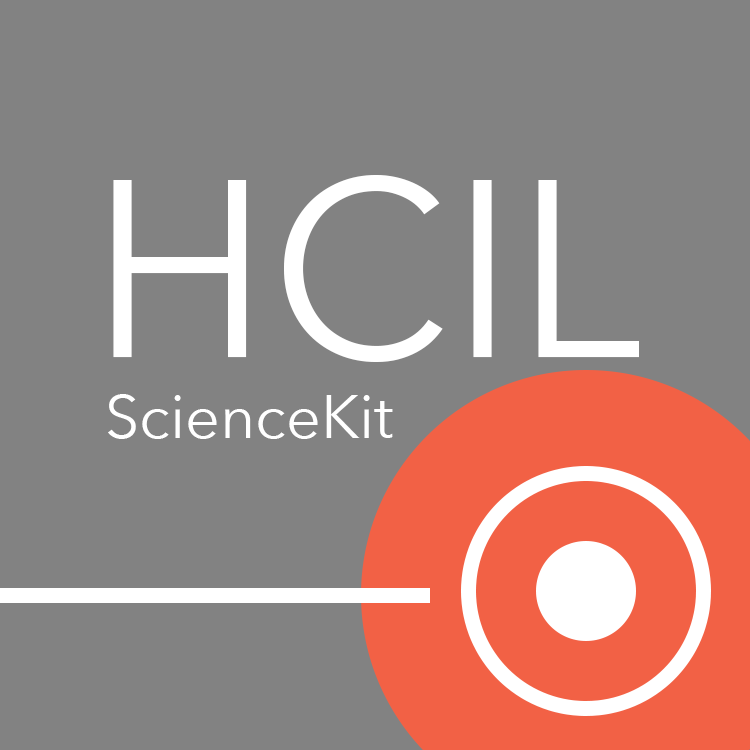
<style>
.page{position:relative;width:750px;height:750px;background:#828282}
.page>*{position:absolute;margin:0}
.t1{font:250px "AvenirNext-Regular";color:#ffffff}
.t2{font:61px "AvenirNext-Regular";color:#ffffff}
</style>
<div class="page">
<p class="t1" style="left:113px;top:175px;width:526px;height:187px">HCIL</p>
<p class="t2" style="left:108px;top:394px;width:285px;height:45px">ScienceKit</p>
</div>
